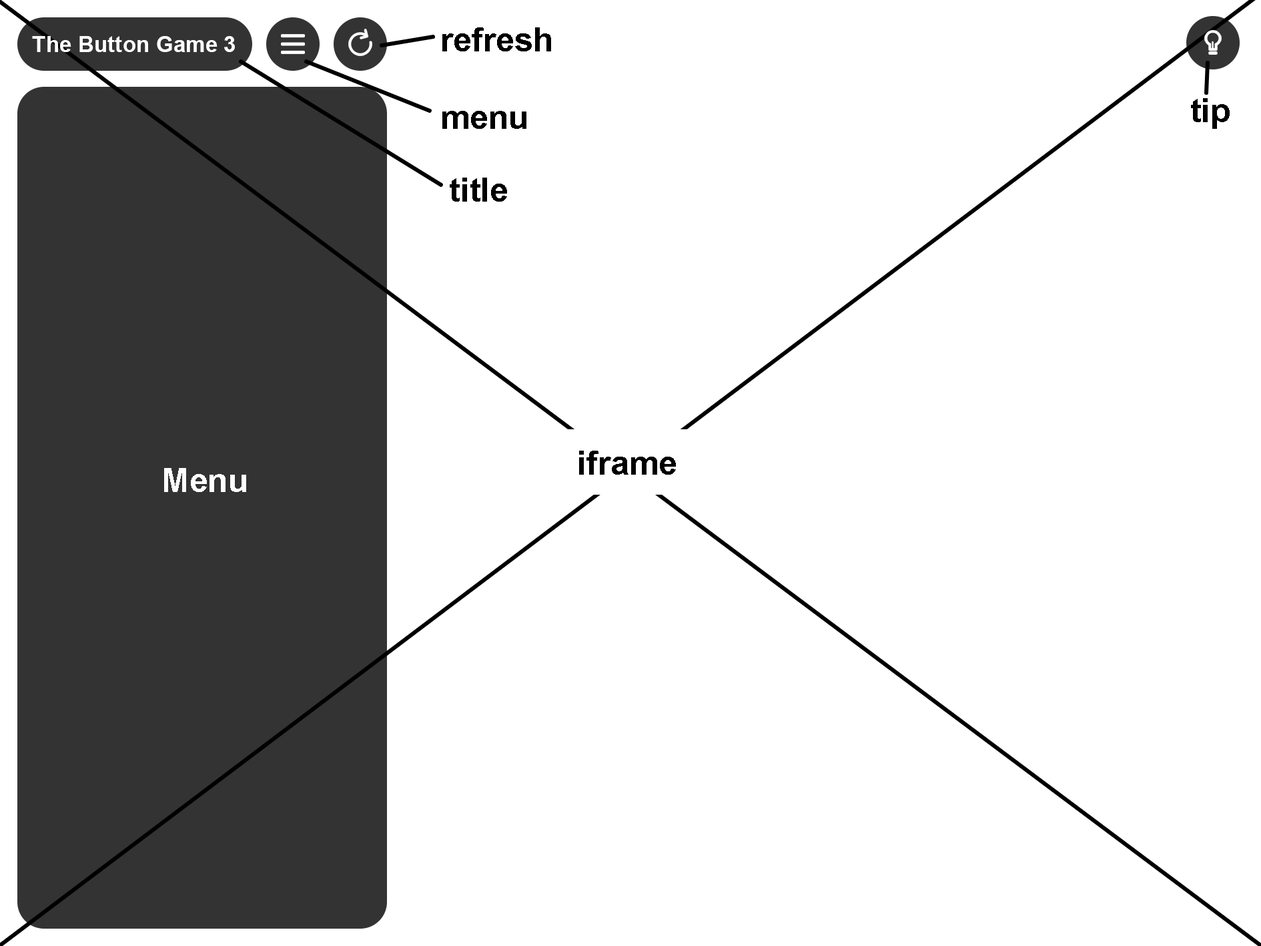
<style>
.page{position:relative;width:1261px;height:946px;background:#ffffff}
.page>*{position:absolute;margin:0}
.t1{font:33.4px "Arial-BoldMT";color:#000000}
.t2{font:22.2px "Arial-BoldMT";color:#ffffff}
.t3{font:33.4px "Arial-BoldMT";color:#ffffff}
</style>
<div class="page">
<p class="t1" style="left:442px;top:27px;width:109px;height:24px">refresh</p>
<p class="t2" style="left:32px;top:36px;width:203px;height:16px">The Button Game 3</p>
<p class="t1" style="left:1191px;top:98px;width:39px;height:31px">tip</p>
<p class="t1" style="left:442px;top:111px;width:84px;height:18px">menu</p>
<p class="t1" style="left:450px;top:177px;width:57px;height:25px">title</p>
<p class="t1" style="left:579px;top:450px;width:97px;height:24px">iframe</p>
<p class="t3" style="left:164px;top:468px;width:82px;height:24px">Menu</p>
</div>
